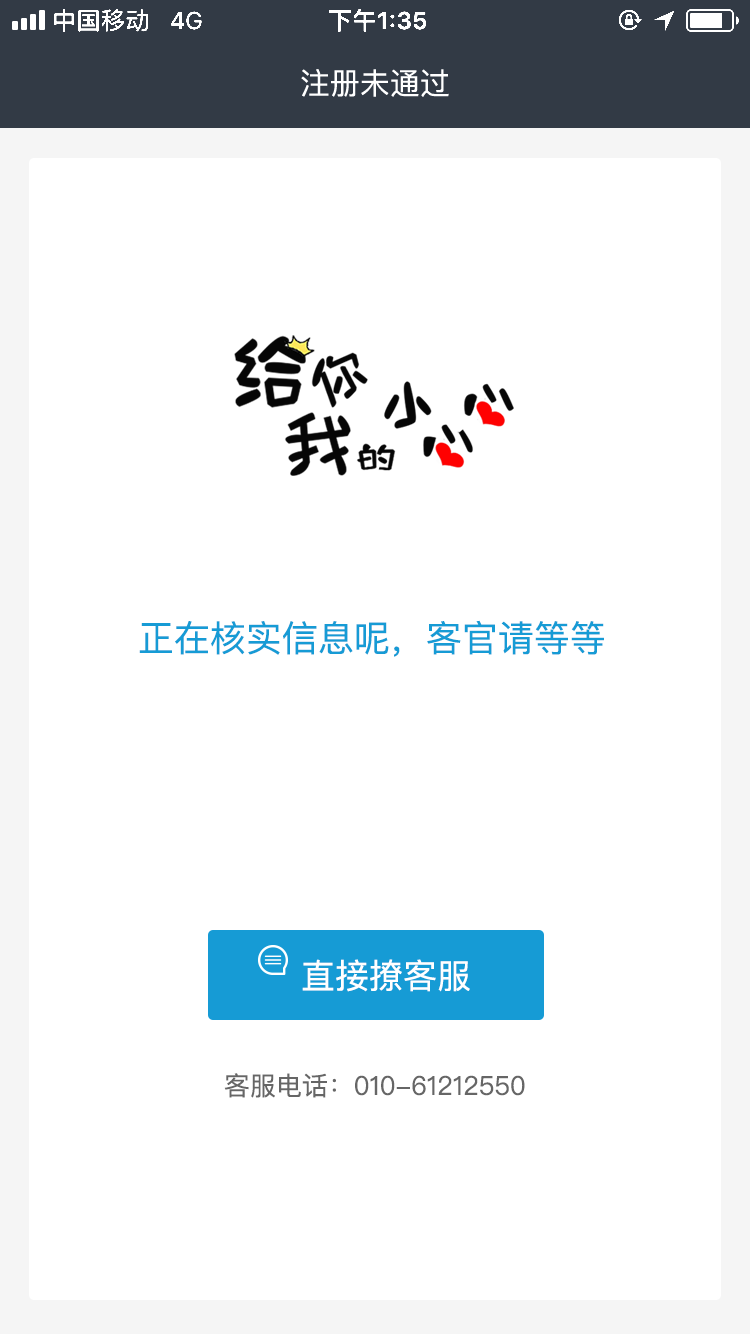
<style>
.page{position:relative;width:750px;height:1334px;background:#ffffff}
.page>*{position:absolute;margin:0}
.t1{font:30px "PingFang-SC-Medium";color:#ffffff}
.t2{font:36px "PingFangSC-Regular";color:#169bd5}
.t3{font:34px "PingFangSC-Regular";color:#ffffff}
.t4{font:26px "PingFangSC-Regular";color:#666666}
</style>
<div class="page">
<p class="t1" style="left:301px;top:69px;width:148px;height:28px">注册未通过</p>
<p class="t2" style="left:139px;top:620px;width:465px;height:37px">正在核实信息呢，客官请等等</p>
<p class="t3" style="left:302px;top:959px;width:168px;height:33px">直接撩客服</p>
<p class="t4" style="left:224px;top:1073px;width:301px;height:25px">客服电话：010-61212550</p>
</div>
